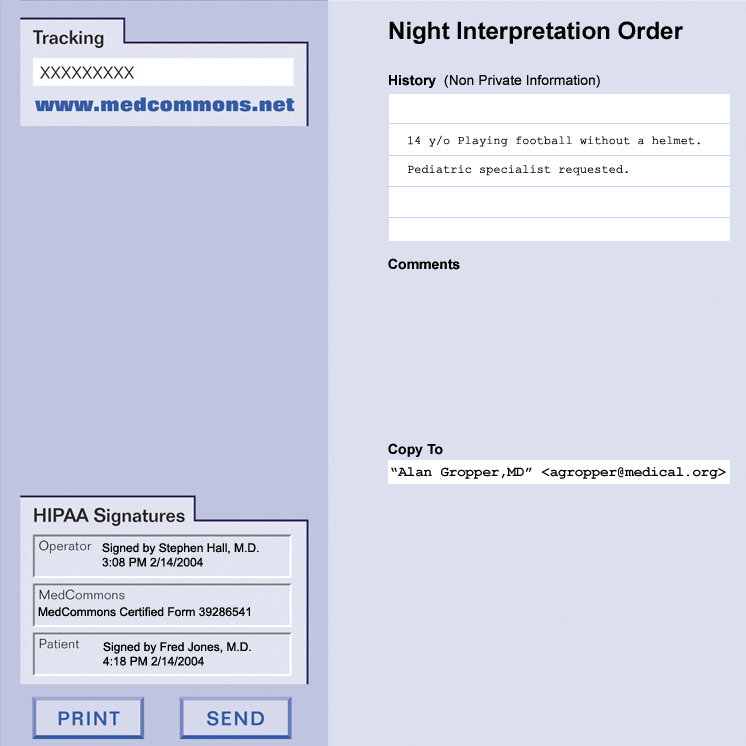
<style>
.page{position:relative;width:746px;height:746px;background:#dcdfee}
.page>*{position:absolute;margin:0}
.t1{font:24px "Arial-BoldMT";color:#000000}
.t2{font:14px "Arial-BoldMT";color:#000000}
.t3{font:14px "ArialMT";color:#000000}
.t4{font:12px "CourierNewPSMT";color:#000000}
.t5{font:14px "CourierNewPS-BoldMT";color:#000000}
.t6{font:12px "ArialMT";color:#000000}
</style>
<div class="page">
<p class="t1" style="left:388px;top:21px;width:295px;height:436px">Night Interpretation Order<br><br><span class="t2">History  </span><span class="t3">(Non Private Information)<br></span><span class="t2"><br><br><br><br><br><br><br><br><br><br>Comments<br><br><br><br><br><br><br><br><br><br><br>Copy To</span></p>
<p class="t4" style="left:408px;top:135px;width:292px;height:41px">14 y/o Playing football without a helmet.<br><br>Pediatric specialist requested.</p>
<p class="t5" style="left:391px;top:467px;width:336px;height:12px">“Alan Gropper,MD” &lt;agropper@medical.org&gt;</p>
<p class="t6" style="left:102px;top:543px;width:157px;height:24px">Signed by Stephen Hall, M.D. <br>3:08 PM 2/14/2004</p>
<p class="t6" style="left:38px;top:607px;width:212px;height:10px">MedCommons Certified Form 39286541</p>
<p class="t6" style="left:103px;top:642px;width:148px;height:24px">Signed by Fred Jones, M.D. <br>4:18 PM 2/14/2004</p>
</div>
